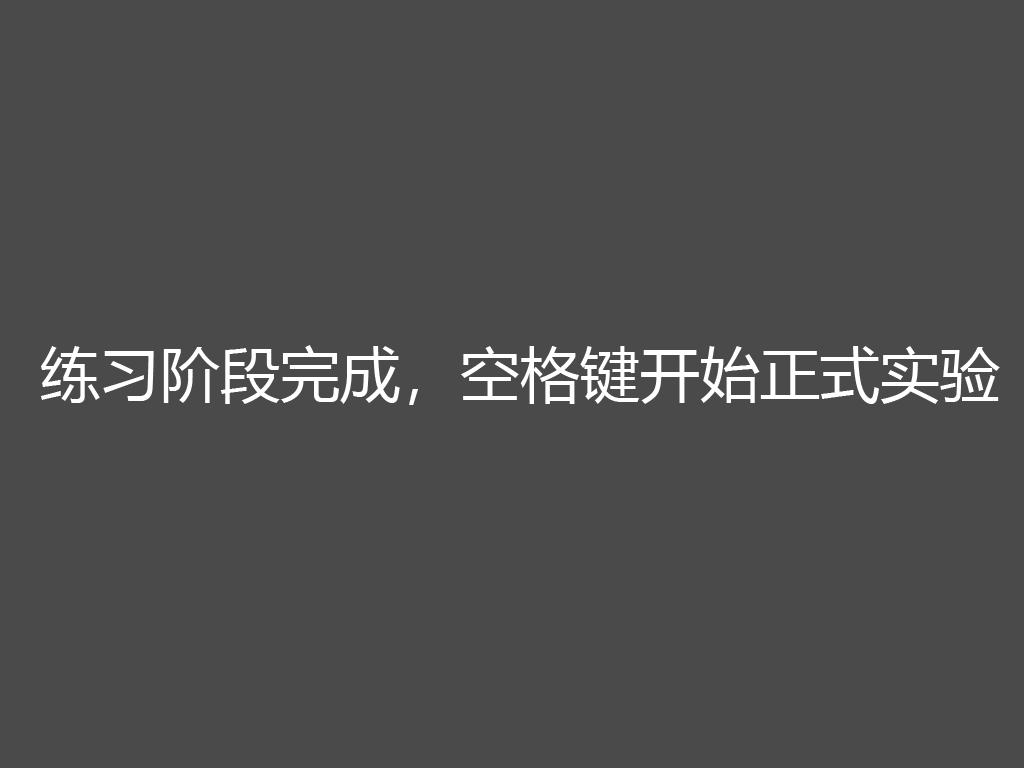
<style>
.page{position:relative;width:1024px;height:768px;background:#4a4a4a}
.page>*{position:absolute;margin:0}
.t1{font:60px "MicrosoftYaHei";color:#ffffff}
</style>
<div class="page">
<p class="t1" style="left:40px;top:345px;width:960px;height:60px">练习阶段完成，空格键开始正式实验</p>
</div>
